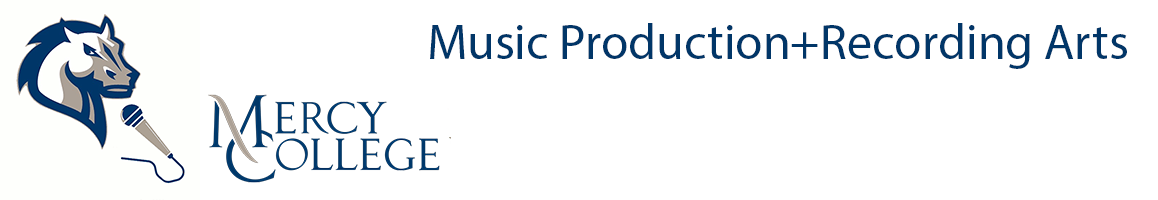
<style>
.page{position:relative;width:1158px;height:200px;background:#ffffff}
.page>*{position:absolute;margin:0}
.t1{font:50px "MyriadPro-Regular";color:#013668}
</style>
<div class="page">
<p class="t1" style="left:430px;top:23px;width:697px;height:46px">Music Production+Recording Arts</p>
</div>
